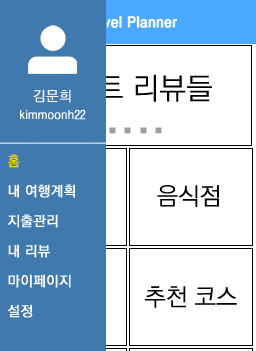
<style>
.page{position:relative;width:256px;height:351px;background:#ffffff}
.page>*{position:absolute;margin:0}
.t1{font:12px/18px "YGO520";letter-spacing:-0.005em;color:#ffffff;font-weight:bold}
.t2{font:14px/18px "YGO520";letter-spacing:-0.005em;color:#ffffff;font-weight:bold}
.t3{font:14px/30px "YGO530";letter-spacing:-0.005em;color:#ffffff;font-weight:bold}
.t4{font:14px/30px "YGO530";letter-spacing:-0.005em;color:#ffd200;font-weight:bold}
</style>
<div class="page">
<p class="t1" style="left:20px;top:89px;width:66px;height:31px;text-align:center"><span class="t2">김문희<br></span>kimmoonh22</p>
<p class="t3" style="left:7px;top:154px;width:68px;height:164px"><span class="t4">홈<br></span>내 여행계획<br>지출관리<br>내 리뷰<br>마이페이지<br>설정</p>
</div>
